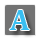
<style>
.page{position:relative;width:40px;height:40px;background:#ffffff}
.page>*{position:absolute;margin:0}
.t1{font:30px "Cambria-Bold";color:#39bef1}
</style>
<div class="page">
<p class="t1" style="left:9px;top:10px;width:21px;height:20px">A</p>
</div>
